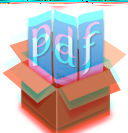
<style>
.page{position:relative;width:128px;height:133px;background:#ffffff}
.page>*{position:absolute;margin:0}
.t1{font:38.6px "FertigoPro-Regular";scale:1.07 1}
.t2{font:38.6px "FertigoPro-Regular";scale:1.08 1}
</style>
<div class="page">
<p class="t1" style="left:32px;top:22px;width:19px;height:33px;rotate:-21deg">p</p>
<p class="t2" style="left:55px;top:24px;width:21px;height:32px;rotate:22deg">d</p>
<p class="t1" style="left:82px;top:19px;width:18px;height:45px;rotate:-21deg">f</p>
</div>
